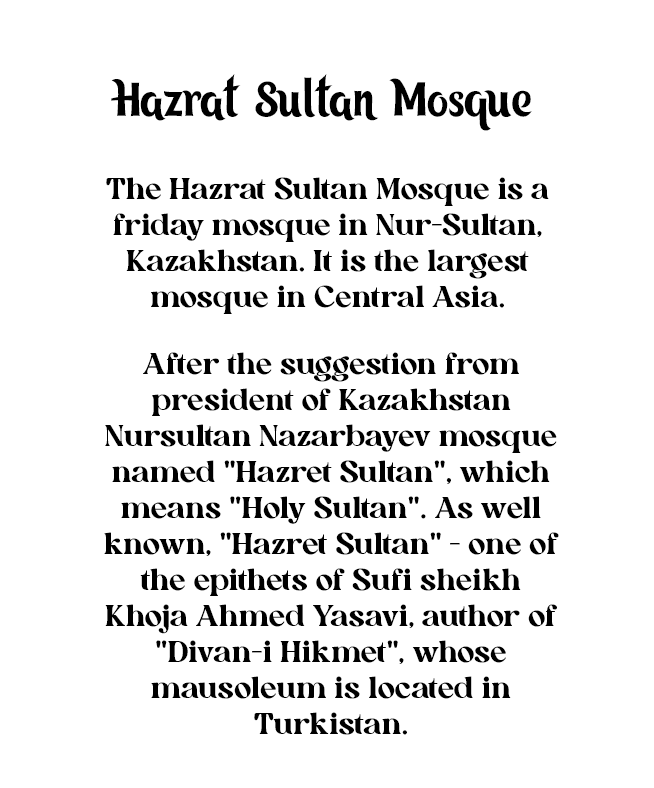
<style>
.page{position:relative;width:654px;height:788px;background:#ffffff}
.page>*{position:absolute;margin:0}
.t1{font:48px "KZ_Tangak-Regular";color:#000000}
.t2{font:30px "AllenoireFreePersonal-Regular";color:#000000}
</style>
<div class="page">
<p class="t1" style="left:111px;top:74px;width:421px;height:57px">Hazrat Sultan Mosque</p>
<p class="t2" style="left:106px;top:177px;width:443px;height:137px;text-align:center">The Hazrat Sultan Mosque is a friday mosque in Nur-Sultan, Kazakhstan. It is the largest mosque in Central Asia.</p>
<p class="t2" style="left:104px;top:352px;width:455px;height:383px;text-align:center">After the suggestion from president of Kazakhstan Nursultan Nazarbayev mosque named "Hazret Sultan", which means "Holy Sultan". As well known, "Hazret Sultan" - one of the epithets of Sufi sheikh Khoja Ahmed Yasavi, author of "Divan-i Hikmet", whose mausoleum is located in Turkistan.</p>
</div>
